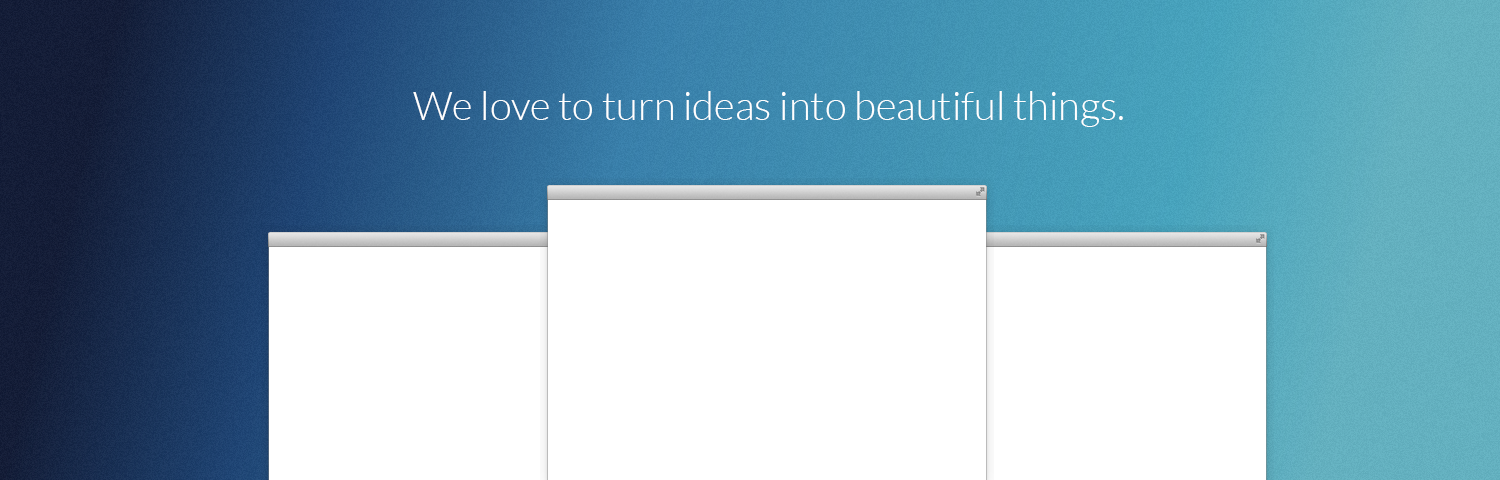
<style>
.page{position:relative;width:1500px;height:480px;background:#ffffff}
.page>*{position:absolute;margin:0}
.t1{font:40px "Lato-Light";color:#ffffff}
</style>
<div class="page">
<p class="t1" style="left:413px;top:91px;width:710px;height:36px">We love to turn ideas into beautiful things.</p>
</div>
